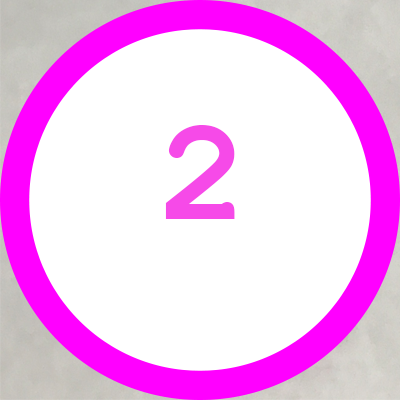
<style>
.page{position:relative;width:400px;height:400px;background:#ffffff}
.page>*{position:absolute;margin:0}
.t1{font:150px "CourierNewPS-BoldMT";color:#f64ae8}
</style>
<div class="page">
<p class="t1" style="left:165px;top:125px;width:70px;height:94px">2</p>
</div>
